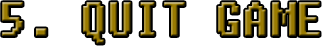
<style>
.page{position:relative;width:322px;height:46px;background:#ffffff}
.page>*{position:absolute;margin:0}
.t1{font:48px "Fixedsys";scale:0.9 1}
</style>
<div class="page">
<p class="t1" style="left:2px;top:2px;width:318px;height:42px">5. QUIT GAME</p>
</div>
